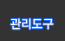
<style>
.page{position:relative;width:65px;height:41px;background:#333333}
.page>*{position:absolute;margin:0}
.t1{font:12px "YGO540";color:#fcfcfc}
</style>
<div class="page">
<p class="t1" style="left:10px;top:18px;width:44px;height:12px">관리도구</p>
</div>
